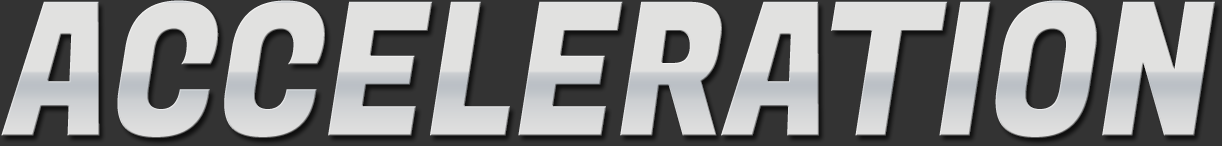
<style>
.page{position:relative;width:1222px;height:146px;background:#333333}
.page>*{position:absolute;margin:0}
.t1{font:185.2px "FugazOne-Regular";color:#dfdfdf;scale:0.89 1}
</style>
<div class="page">
<p class="t1" style="left:1px;top:0px;width:1214px;height:138px">ACCELERATION</p>
</div>
